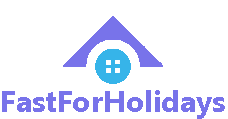
<style>
.page{position:relative;width:228px;height:119px;background:#ffffff}
.page>*{position:absolute;margin:0}
.t1{font:30px "Ebrima-Bold";color:#7873ea}
</style>
<div class="page">
<p class="t1" style="left:2px;top:90px;width:223px;height:29px">FastForHolidays</p>
</div>
